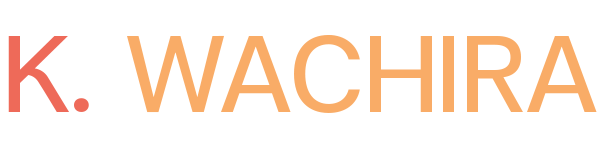
<style>
.page{position:relative;width:600px;height:150px;background:#ffffff}
.page>*{position:absolute;margin:0}
.t1{font:148.6px "FCMinimalRegular";color:#f9ac67}
.t2{font:148.6px "FCMinimalRegular";color:#ee6a59}
</style>
<div class="page">
<p class="t1" style="left:8px;top:34px;width:589px;height:79px"><span class="t2">K. </span>WACHIRA</p>
</div>
